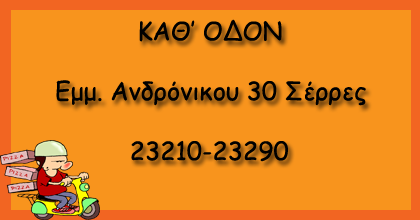
<style>
.page{position:relative;width:420px;height:220px;background:#f8941d}
.page>*{position:absolute;margin:0}
.t1{font:25px "ComicSansMS";color:#000000}
</style>
<div class="page">
<p class="t1" style="left:56px;top:19px;width:310px;height:143px">ΚΑΘ’ ΟΔΟΝ<br><br>Εμμ. Ανδρόνικου 30 Σέρρες<br><br>          23210-23290</p>
</div>
